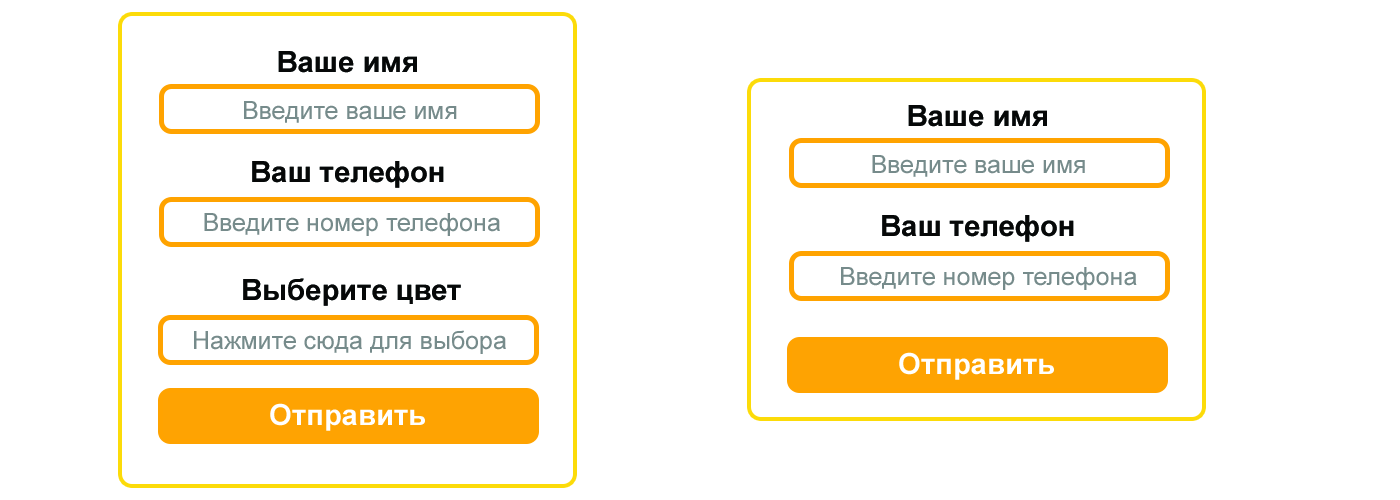
<style>
.page{position:relative;width:1400px;height:500px;background:#ffffff}
.page>*{position:absolute;margin:0}
.t1{font:29.2px "Arial-BoldMT";color:#060808}
.t2{font:25px "ArialMT";color:#768b8b}
.t3{font:29.2px "Arial-BoldMT";color:#ffffff}
</style>
<div class="page">
<p class="t1" style="left:278px;top:51px;width:139px;height:22px">Ваше имя</p>
<p class="t2" style="left:244px;top:101px;width:213px;height:22px">Введите ваше имя</p>
<p class="t1" style="left:908px;top:105px;width:139px;height:22px">Ваше имя</p>
<p class="t1" style="left:252px;top:161px;width:192px;height:27px">Ваш телефон</p>
<p class="t2" style="left:872px;top:155px;width:213px;height:22px">Введите ваше имя</p>
<p class="t2" style="left:204px;top:213px;width:296px;height:23px">Введите номер телефона</p>
<p class="t1" style="left:882px;top:215px;width:192px;height:27px">Ваш телефон</p>
<p class="t2" style="left:841px;top:267px;width:296px;height:23px">Введите номер телефона</p>
<p class="t1" style="left:243px;top:278px;width:218px;height:28px">Выберите цвет</p>
<p class="t2" style="left:194px;top:330px;width:312px;height:24px">Нажмите сюда для выбора</p>
<p class="t3" style="left:899px;top:352px;width:155px;height:28px">Отправить</p>
<p class="t3" style="left:270px;top:403px;width:155px;height:28px">Отправить</p>
</div>
